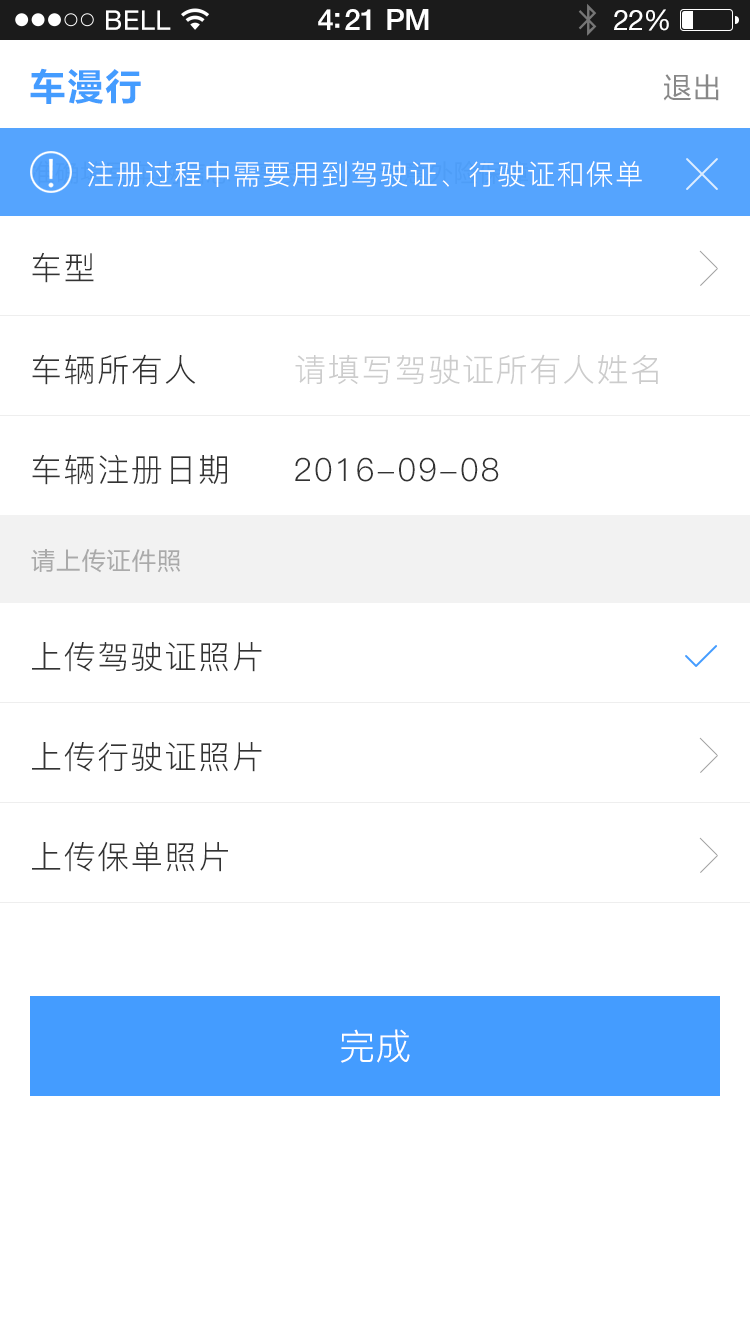
<style>
.page{position:relative;width:750px;height:1334px;background:#ffffff}
.page>*{position:absolute;margin:0}
.t1{font:36px "MicrosoftYaHei-Bold";letter-spacing:0.05em;color:#449cff}
.t2{font:28px "MicrosoftYaHei";letter-spacing:0.05em;color:#888888}
.t3{font:24px "MicrosoftYaHei";letter-spacing:0.05em}
.t4{font:28px "PingFang-SC-Regular";letter-spacing:0.05em;color:#ffffff}
.t5{font:32px "PingFang-SC-Regular";letter-spacing:0.05em;color:#333333}
.t6{font:32px "PingFang-SC-Regular";letter-spacing:0.05em;color:#cccccc}
.t7{font:24px "MicrosoftYaHei";letter-spacing:0.05em;color:#aaaaaa}
.t8{font:36px "PingFang-SC-Regular";color:#ffffff}
</style>
<div class="page">
<p class="t1" style="left:30px;top:68px;width:111px;height:36px">车漫行</p>
<p class="t2" style="left:663px;top:74px;width:56px;height:27px">退出</p>
<p class="t3" style="left:30px;top:160px;width:498px;height:25px">准确填写车辆信息，享受120万元意外险保障</p>
<p class="t4" style="left:87px;top:161px;width:555px;height:26px">注册过程中需要用到驾驶证、行驶证和保单</p>
<p class="t5" style="left:32px;top:252px;width:62px;height:31px">车型</p>
<p class="t5" style="left:32px;top:354px;width:164px;height:31px">车辆所有人</p>
<p class="t6" style="left:295px;top:354px;width:363px;height:31px">请填写驾驶证所有人姓名</p>
<p class="t5" style="left:32px;top:454px;width:195px;height:31px">车辆注册日期</p>
<p class="t5" style="left:295px;top:457px;width:204px;height:25px">2016-09-08</p>
<p class="t7" style="left:31px;top:549px;width:150px;height:24px">请上传证件照</p>
<p class="t5" style="left:32px;top:642px;width:230px;height:30px">上传驾驶证照片</p>
<p class="t5" style="left:32px;top:742px;width:230px;height:30px">上传行驶证照片</p>
<p class="t5" style="left:32px;top:841px;width:196px;height:31px">上传保单照片</p>
<p class="t8" style="left:341px;top:1029px;width:69px;height:34px">完成</p>
</div>
